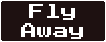
<style>
.page{position:relative;width:106px;height:42px;background:#1e1111}
.page>*{position:absolute;margin:0}
.t1{font:16px "PressStart2P-Regular";color:#ffffff}
</style>
<div class="page">
<p class="t1" style="left:21px;top:4px;width:62px;height:35px;text-align:center">Fly<br>Away</p>
</div>
